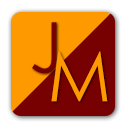
<style>
.page{position:relative;width:128px;height:128px;background:#ff9900}
.page>*{position:absolute;margin:0}
.t1{font:69.3px "CenturyGothic";color:#770000}
.t2{font:69.3px "CenturyGothic";color:#ff9900}
</style>
<div class="page">
<p class="t1" style="left:32px;top:22px;width:25px;height:52px">J</p>
<p class="t2" style="left:51px;top:51px;width:57px;height:51px">M</p>
</div>
